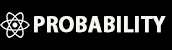
<style>
.page{position:relative;width:172px;height:50px;background:#000000}
.page>*{position:absolute;margin:0}
.t1{font:20.8px "KozGoPr6N-Bold";color:#f7f7f4;font-weight:bold}
</style>
<div class="page">
<p class="t1" style="left:34px;top:16px;width:132px;height:17px">PROBABILITY</p>
</div>
